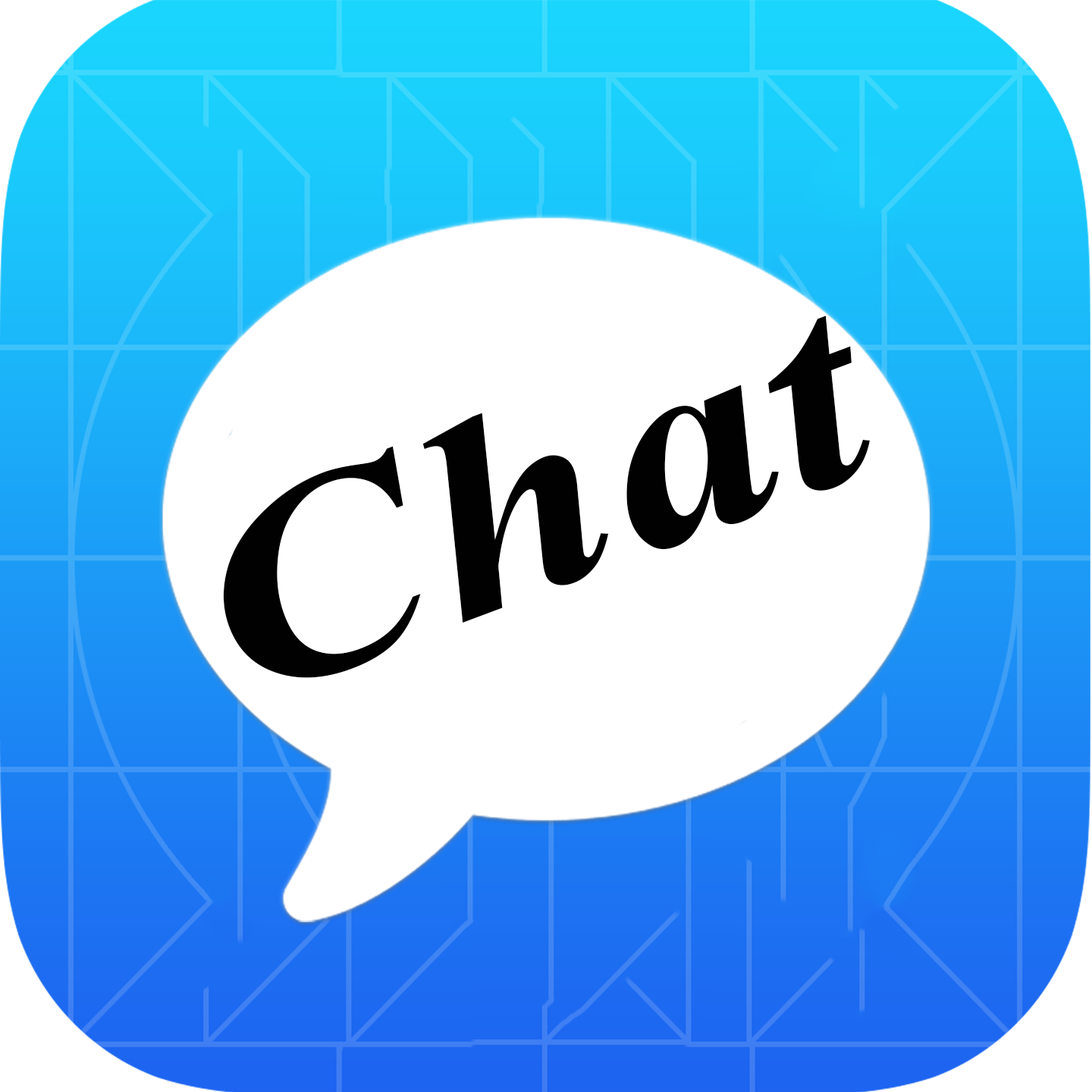
<style>
.page{position:relative;width:1092px;height:1092px;background:#ffffff}
.page>*{position:absolute;margin:0}
.t1{font:349.1px "Aparajita-BoldItalic";color:#020101;scale:1.24 1}
</style>
<div class="page">
<p class="t1" style="left:223px;top:315px;width:647px;height:363px;rotate:-21deg">Chat</p>
</div>
